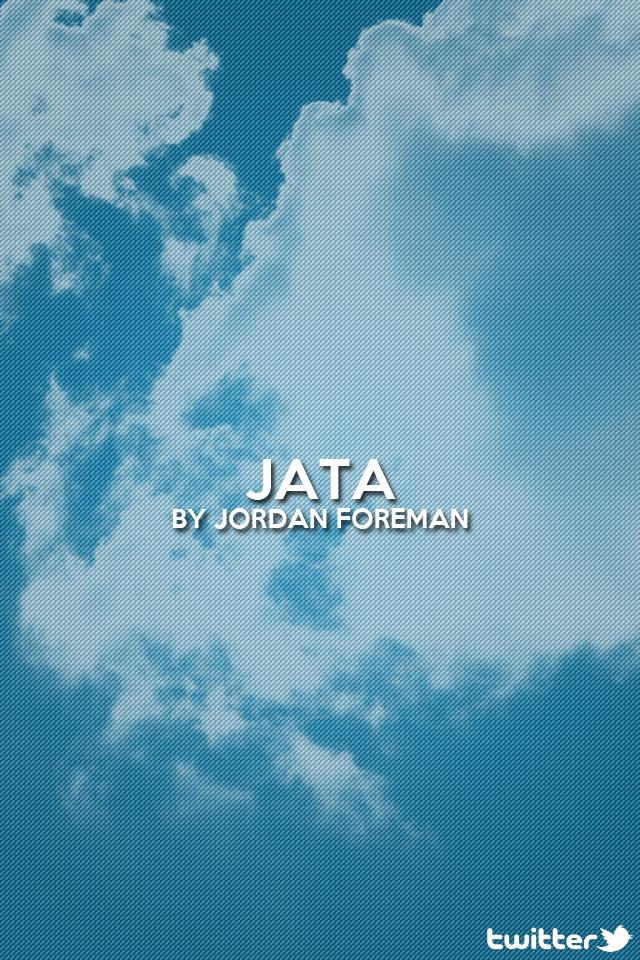
<style>
.page{position:relative;width:640px;height:960px}
.page>*{position:absolute;margin:0}
.t1{font:24px "KeepCalm-Medium";color:#ffffff}
.t2{font:50px "KeepCalm-Medium";color:#ffffff}
</style>
<div class="page">
<p class="t1" style="left:172px;top:459px;width:296px;height:70px;text-align:center"><span class="t2">JATA<br></span>BY JORDAN FOREMAN</p>
</div>
